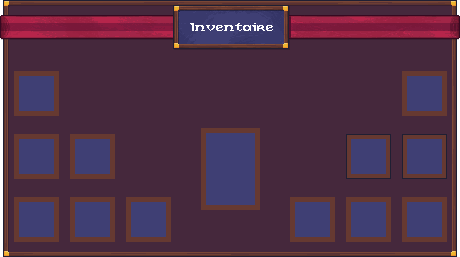
<style>
.page{position:relative;width:460px;height:257px;background:#45283c}
.page>*{position:absolute;margin:0}
.t1{font:8px "Celtic-Bit-Regular";color:#ffffff}
</style>
<div class="page">
<p class="t1" style="left:190px;top:23px;width:83px;height:8px">Inventaire</p>
</div>
